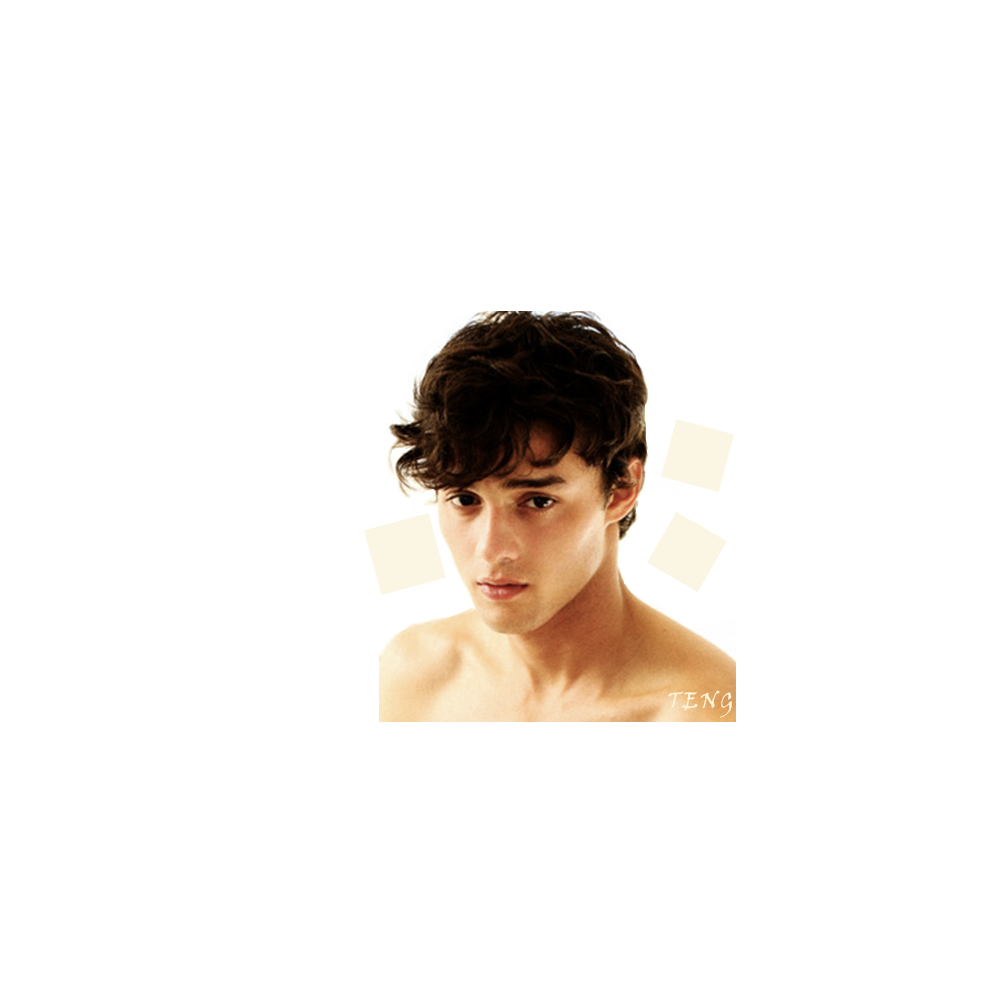
<style>
.page{position:relative;width:1000px;height:1000px;background:#ffffff}
.page>*{position:absolute;margin:0}
.t1{font:22px "VinerHandITC";letter-spacing:0.1em;color:#fbf4da}
</style>
<div class="page">
<p class="t1" style="left:668px;top:690px;width:64px;height:28px">TENG</p>
</div>
